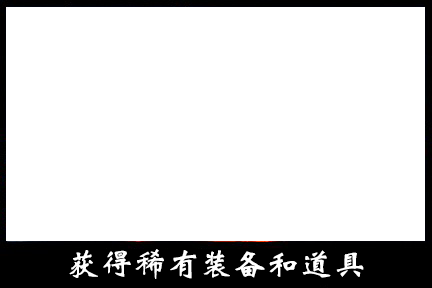
<style>
.page{position:relative;width:432px;height:288px;background:#ffffff}
.page>*{position:absolute;margin:0}
.t1{font:32px "FZWBK--GBK1-0";letter-spacing:0.04em;color:#ffffff}
</style>
<div class="page">
<p class="t1" style="left:69px;top:249px;width:295px;height:30px">获得稀有装备和道具</p>
</div>
